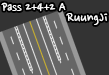
<style>
.page{position:relative;width:109px;height:75px;background:#333333}
.page>*{position:absolute;margin:0}
.t1{font:14px "NanumPen";color:#ffffff}
.t2{font:16px "NanumPen";color:#ffffff}
</style>
<div class="page">
<p class="t1" style="left:1px;top:2px;width:65px;height:10px">Pass 2+4+2 A</p>
<p class="t2" style="left:66px;top:13px;width:42px;height:12px">RuungJi</p>
</div>
